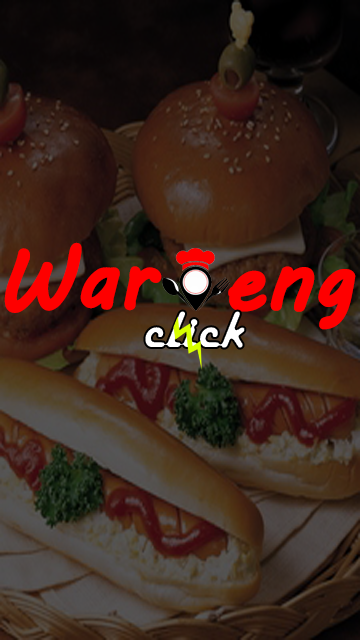
<style>
.page{position:relative;width:360px;height:640px}
.page>*{position:absolute;margin:0}
.t1{font:82px "MVBoli";color:#fe0000;font-weight:bold}
.t2{font:54.6px "HarlowSolid";font-weight:bold}
</style>
<div class="page">
<p class="t1" style="left:4px;top:242px;width:158px;height:71px">War</p>
<p class="t1" style="left:228px;top:266px;width:128px;height:64px">eng</p>
<p class="t2" style="left:143px;top:309px;width:104px;height:41px">click</p>
</div>
